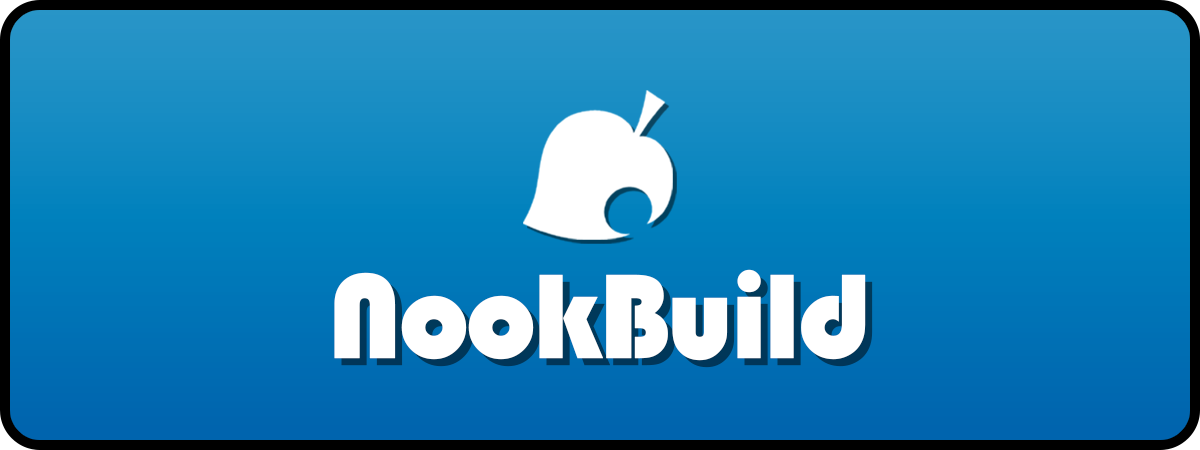
<style>
.page{position:relative;width:1200px;height:450px}
.page>*{position:absolute;margin:0}
.t1{font:124.8px "Bauhaus93";letter-spacing:-0.05em;color:#ffffff;font-weight:bold}
</style>
<div class="page">
<p class="t1" style="left:334px;top:269px;width:532px;height:92px">NookBuild</p>
</div>
